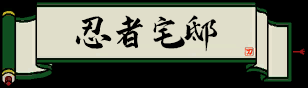
<style>
.page{position:relative;width:308px;height:88px;background:#000000}
.page>*{position:absolute;margin:0}
.t1{font:40px "zihun110hao-wulinjianghuti-Regular";letter-spacing:-0.1em;color:#000000}
</style>
<div class="page">
<p class="t1" style="left:75px;top:15px;width:143px;height:37px">忍者宅邸</p>
</div>
